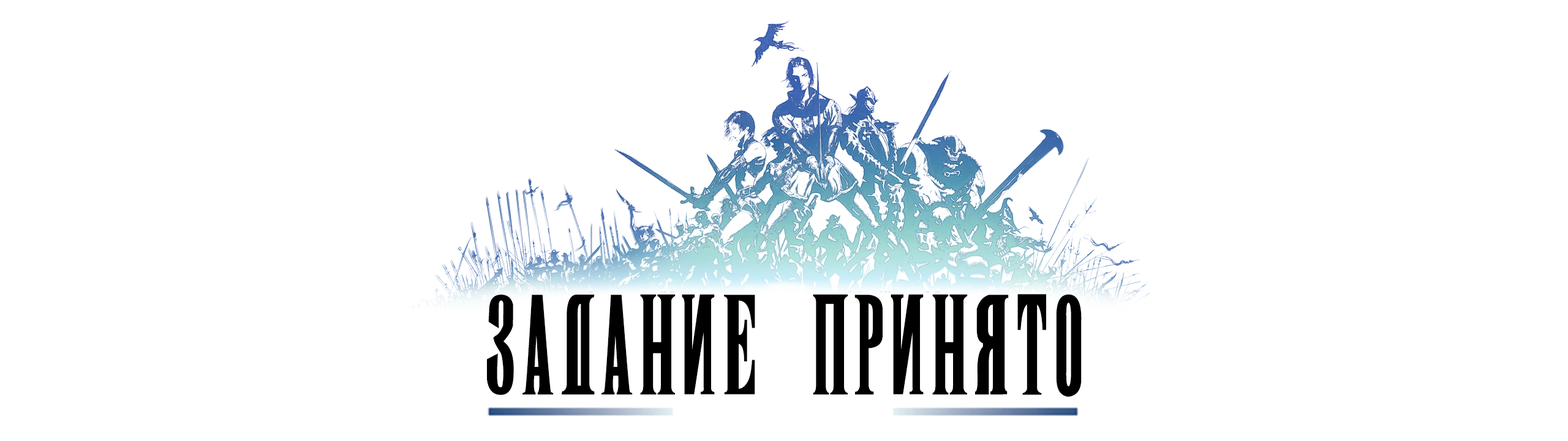
<style>
.page{position:relative;width:1568px;height:441px;background:#ffffff}
.page>*{position:absolute;margin:0}
.t1{font:103.5px "FinalFantasyRusbyme-Classical";letter-spacing:0.04em;color:#000000}
</style>
<div class="page">
<p class="t1" style="left:487px;top:294px;width:595px;height:103px">ЗАДАНИЕ ПРИНЯТО</p>
</div>
